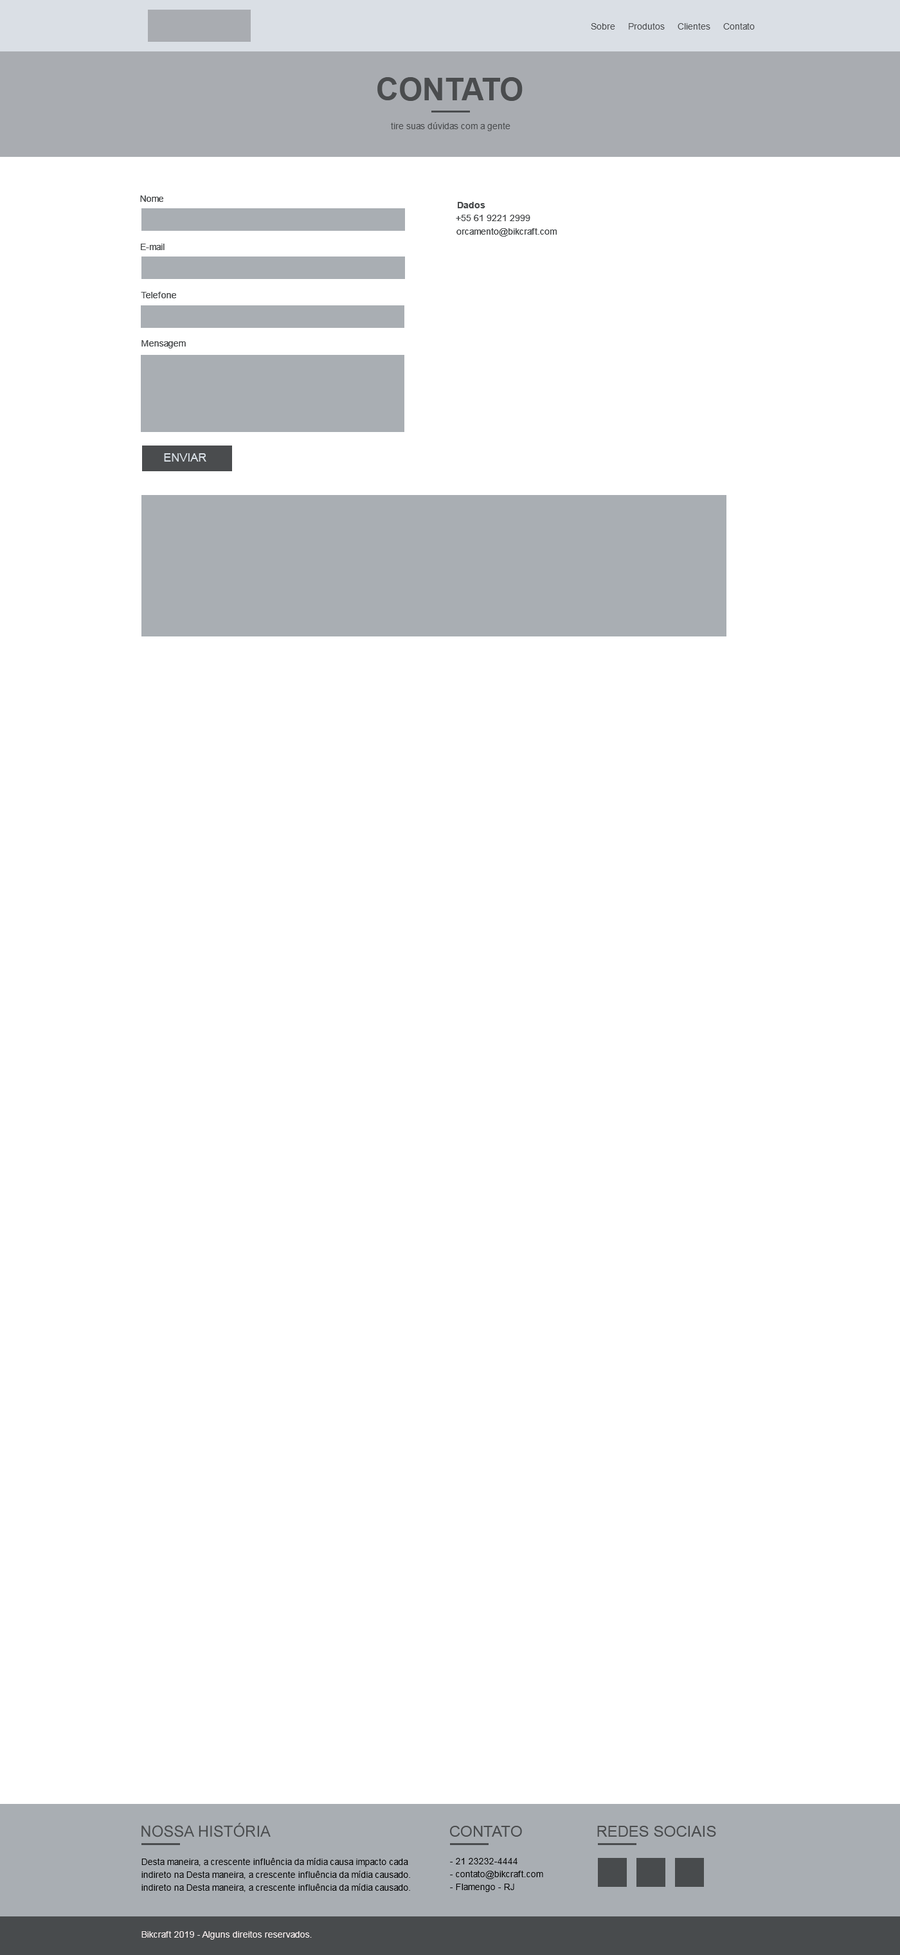
<style>
.page{position:relative;width:900px;height:1955px;background:#ffffff}
.page>*{position:absolute;margin:0}
.t1{font:9px "ArialMT";color:#4a4c4e}
.t2{font:30.9px "Arial-BoldMT";color:#4a4c4e;text-transform:uppercase}
.t3{font:9px "Arial-BoldMT";color:#4a4c4e}
.t4{font:11.6px "ArialMT";color:#d9e0e6}
.t5{font:15.4px "ArialMT";color:#4a4c4e}
.t6{font:9px/12.9px "ArialMT";color:#000000}
.t7{font:9px "ArialMT";color:#f9f0f0}
</style>
<div class="page">
<p class="t1" style="left:591px;top:23px;width:164px;height:7px">Sobre     Produtos     Clientes     Contato</p>
<p class="t2" style="left:377px;top:77px;width:146px;height:24px">CONTATO</p>
<p class="t2" style="left:377px;top:77px;width:146px;height:24px">CONTATO</p>
<p class="t1" style="left:391px;top:122px;width:119px;height:9px">tire suas dúvidas com a gente</p>
<p class="t1" style="left:391px;top:122px;width:119px;height:9px">tire suas dúvidas com a gente</p>
<p class="t1" style="left:140px;top:195px;width:23px;height:7px">Nome</p>
<p class="t1" style="left:140px;top:195px;width:23px;height:7px">Nome</p>
<p class="t3" style="left:458px;top:202px;width:27px;height:6px">Dados</p>
<p class="t3" style="left:458px;top:202px;width:27px;height:6px">Dados</p>
<p class="t1" style="left:456px;top:215px;width:74px;height:6px">+55 61 9221 2999</p>
<p class="t1" style="left:456px;top:215px;width:74px;height:6px">+55 61 9221 2999</p>
<p class="t1" style="left:456px;top:228px;width:101px;height:9px">orcamento@bikcraft.com</p>
<p class="t1" style="left:456px;top:228px;width:101px;height:9px">orcamento@bikcraft.com</p>
<p class="t1" style="left:141px;top:244px;width:24px;height:6px">E-mail</p>
<p class="t1" style="left:141px;top:244px;width:24px;height:6px">E-mail</p>
<p class="t1" style="left:141px;top:292px;width:35px;height:6px">Telefone</p>
<p class="t1" style="left:141px;top:292px;width:35px;height:6px">Telefone</p>
<p class="t1" style="left:141px;top:340px;width:45px;height:8px">Mensagem</p>
<p class="t1" style="left:141px;top:340px;width:45px;height:8px">Mensagem</p>
<p class="t4" style="left:164px;top:453px;width:42px;height:9px">ENVIAR</p>
<p class="t5" style="left:141px;top:1823px;width:130px;height:14px">NOSSA HISTÓRIA</p>
<p class="t5" style="left:450px;top:1826px;width:72px;height:11px">CONTATO</p>
<p class="t5" style="left:597px;top:1826px;width:119px;height:11px">REDES SOCIAIS</p>
<p class="t6" style="left:141px;top:1858px;width:269px;height:34px">Desta maneira, a crescente influência da mídia causa impacto cada<br>indireto na Desta maneira, a crescente influência da mídia causado. <br>indireto na Desta maneira, a crescente influência da mídia causado.</p>
<p class="t6" style="left:450px;top:1858px;width:93px;height:34px">- 21 23232-4444<br>- contato@bikcraft.com<br>- Flamengo - RJ</p>
<p class="t7" style="left:141px;top:1931px;width:171px;height:9px">Bikcraft 2019 - Alguns direitos reservados.</p>
</div>
